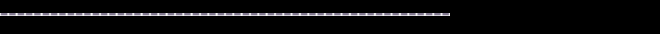
<style>
.page{position:relative;width:660px;height:34px;background:#000000}
.page>*{position:absolute;margin:0}
.t1{font:24px "WebPSD-18463539-0-Regular";color:#837a91;font-weight:bold}
</style>
<div class="page">
<p class="t1" style="left:0px;top:0px;width:660px;height:34px">------------------------------------------------------</p>
</div>
